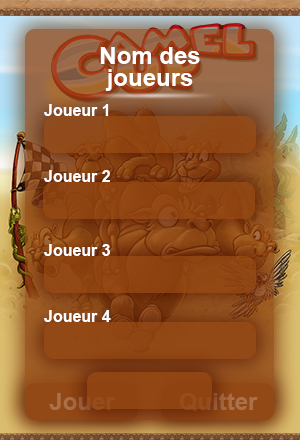
<style>
.page{position:relative;width:300px;height:440px}
.page>*{position:absolute;margin:0}
.t1{font:24px "Arial-BoldMT";color:#ffffff}
.t2{font:16px "Arial-BoldMT";color:#ffffff}
</style>
<div class="page">
<p class="t1" style="left:100px;top:47px;width:100px;height:44px;text-align:center">Nom des<br>joueurs</p>
<p class="t2" style="left:44px;top:104px;width:65px;height:12px">Joueur 1</p>
<p class="t2" style="left:44px;top:170px;width:66px;height:12px">Joueur 2</p>
<p class="t2" style="left:44px;top:244px;width:66px;height:12px">Joueur 3</p>
<p class="t2" style="left:44px;top:310px;width:67px;height:12px">Joueur 4</p>
</div>
